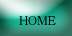
<style>
.page{position:relative;width:72px;height:36px}
.page>*{position:absolute;margin:0}
.t1{font:12px "Batang";color:#000000}
</style>
<div class="page">
<p class="t1" style="left:19px;top:16px;width:37px;height:9px">HOME</p>
</div>
